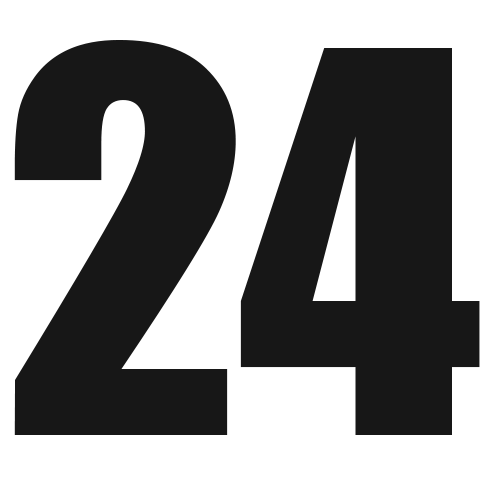
<style>
.page{position:relative;width:480px;height:480px;background:#171717}
.page>*{position:absolute;margin:0}
.t1{font:490.3px "Impact";color:#171717}
</style>
<div class="page">
<p class="t1" style="left:14px;top:40px;width:466px;height:395px">24</p>
</div>
